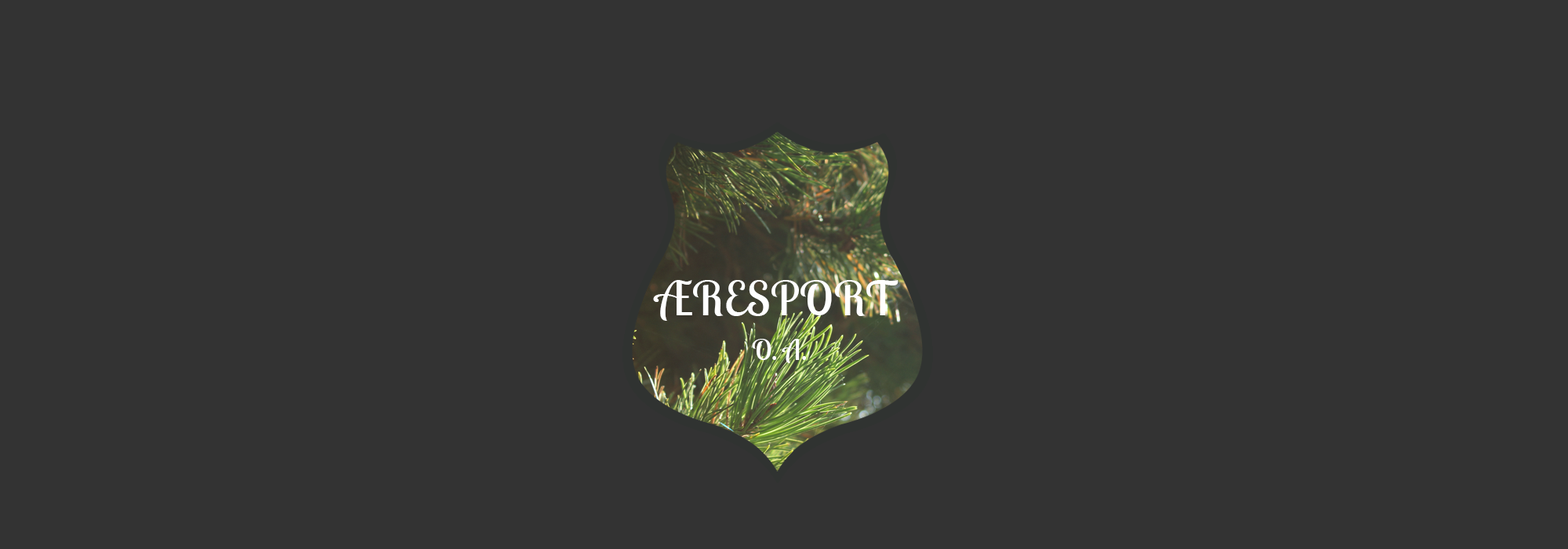
<style>
.page{position:relative;width:1568px;height:549px;background:#333333}
.page>*{position:absolute;margin:0}
.t1{font:47px "LobsterTwo";letter-spacing:0.025em;color:#ffffff;text-transform:uppercase}
.t2{font:28.2px "LobsterTwo";letter-spacing:0.025em;color:#ffffff;text-transform:uppercase}
</style>
<div class="page">
<p class="t1" style="left:653px;top:280px;width:245px;height:41px">Æresport</p>
<p class="t2" style="left:752px;top:339px;width:25px;height:21px">O.</p>
<p class="t2" style="left:782px;top:339px;width:25px;height:24px">A.</p>
</div>
